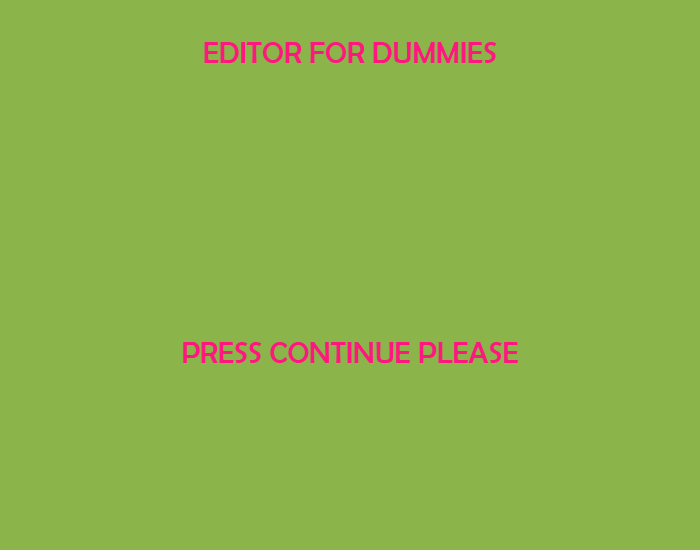
<style>
.page{position:relative;width:700px;height:550px;background:#8bb54a}
.page>*{position:absolute;margin:0}
.t1{font:30px "BerlinSansFB-Reg";color:#ff167e}
</style>
<div class="page">
<p class="t1" style="left:204px;top:42px;width:293px;height:21px">EDITOR FOR DUMMIES</p>
<p class="t1" style="left:183px;top:342px;width:335px;height:21px">PRESS CONTINUE PLEASE</p>
</div>
